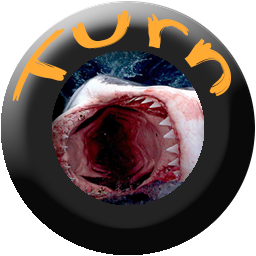
<style>
.page{position:relative;width:256px;height:256px;background:#ffffff}
.page>*{position:absolute;margin:0}
.t1{font:50px "FingerPaint-Regular";letter-spacing:0.05em;color:#ffab33}
</style>
<div class="page">
<p class="t1" style="left:12px;top:10px;width:219px;height:92px">Turn</p>
</div>
